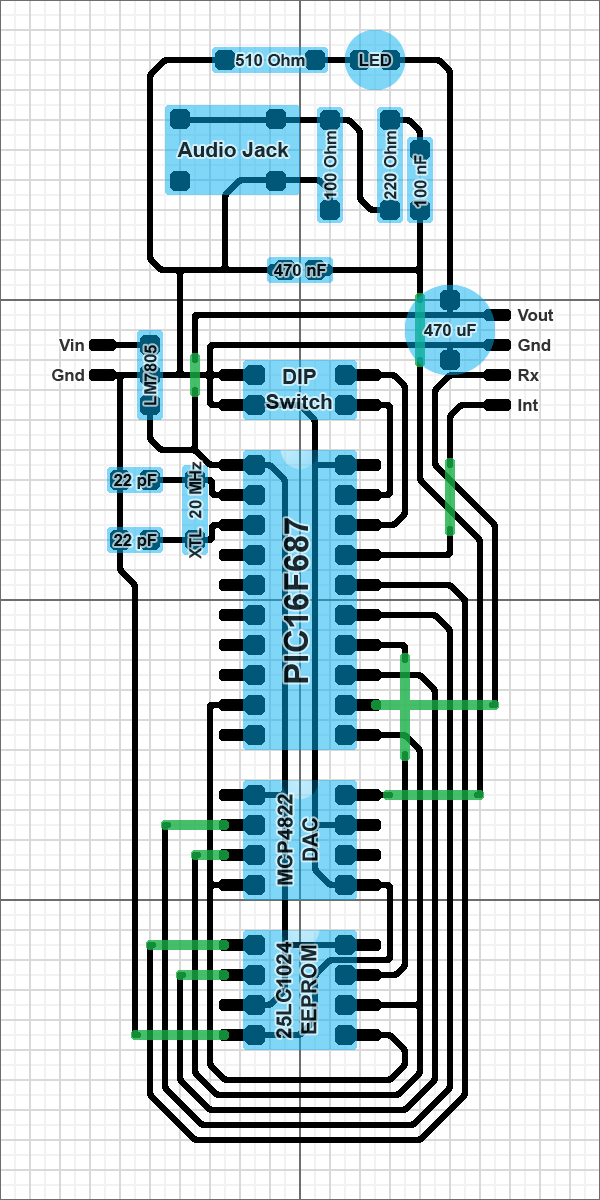
<style>
.page{position:relative;width:600px;height:1200px;background:#ffffff}
.page>*{position:absolute;margin:0}
.t1{font:16.7px "Arial-BoldMT";color:#192b31}
.t2{font:16.7px "Arial-BoldMT";color:#000000}
.t3{font:20.8px "Arial-BoldMT";color:#192b31}
.t4{font:16.7px/15px "Arial-BoldMT";color:#333333}
.t5{font:16.7px "Arial-BoldMT"}
.t6{font:33.3px "Arial-BoldMT";color:#192b31}
.t7{font:20.8px "Arial-BoldMT"}
</style>
<div class="page">
<p class="t1" style="left:235px;top:54px;width:70px;height:12px">510 Ohm</p>
<p class="t2" style="left:359px;top:54px;width:33px;height:12px;opacity:0.8">LED</p>
<p class="t1" style="left:324px;top:131px;width:13px;height:68px;rotate:-90deg">100 Ohm</p>
<p class="t1" style="left:384px;top:131px;width:13px;height:69px;rotate:-90deg">220 Ohm</p>
<p class="t3" style="left:177px;top:142px;width:112px;height:15px">Audio Jack</p>
<p class="t1" style="left:414px;top:155px;width:13px;height:52px;rotate:-90deg">100 nF</p>
<p class="t2" style="left:274px;top:264px;width:52px;height:12px;opacity:0.8">470 nF</p>
<p class="t4" style="left:517px;top:309px;width:37px;height:102px">Vout<br><br>Gnd<br><br>Rx<br><br>Int</p>
<p class="t1" style="left:424px;top:324px;width:52px;height:12px">470 uF</p>
<p class="t4" style="left:52px;top:339px;width:32px;height:42px;text-align:right">Vin<br><br>Gnd</p>
<p class="t5" style="left:144px;top:345px;width:13px;height:60px;rotate:-90deg">LM7805</p>
<p class="t3" style="left:266px;top:369px;width:66px;height:40px;text-align:center">DIP<br>Switch</p>
<p class="t5" style="left:189px;top:461px;width:13px;height:98px;rotate:-90deg">XTL  20 MHz</p>
<p class="t2" style="left:114px;top:474px;width:43px;height:15px;opacity:0.8">22 pF</p>
<p class="t6" style="left:283px;top:518px;width:26px;height:165px;rotate:-90deg">PIC16F687</p>
<p class="t2" style="left:114px;top:534px;width:43px;height:15px;opacity:0.8">22 pF</p>
<p class="t7" style="left:277px;top:794px;width:41px;height:91px;text-align:center;rotate:-90deg">MCP4822<br>DAC</p>
<p class="t3" style="left:276px;top:942px;width:41px;height:97px;text-align:center;rotate:-90deg">25LC1024<br>EEPROM</p>
</div>
